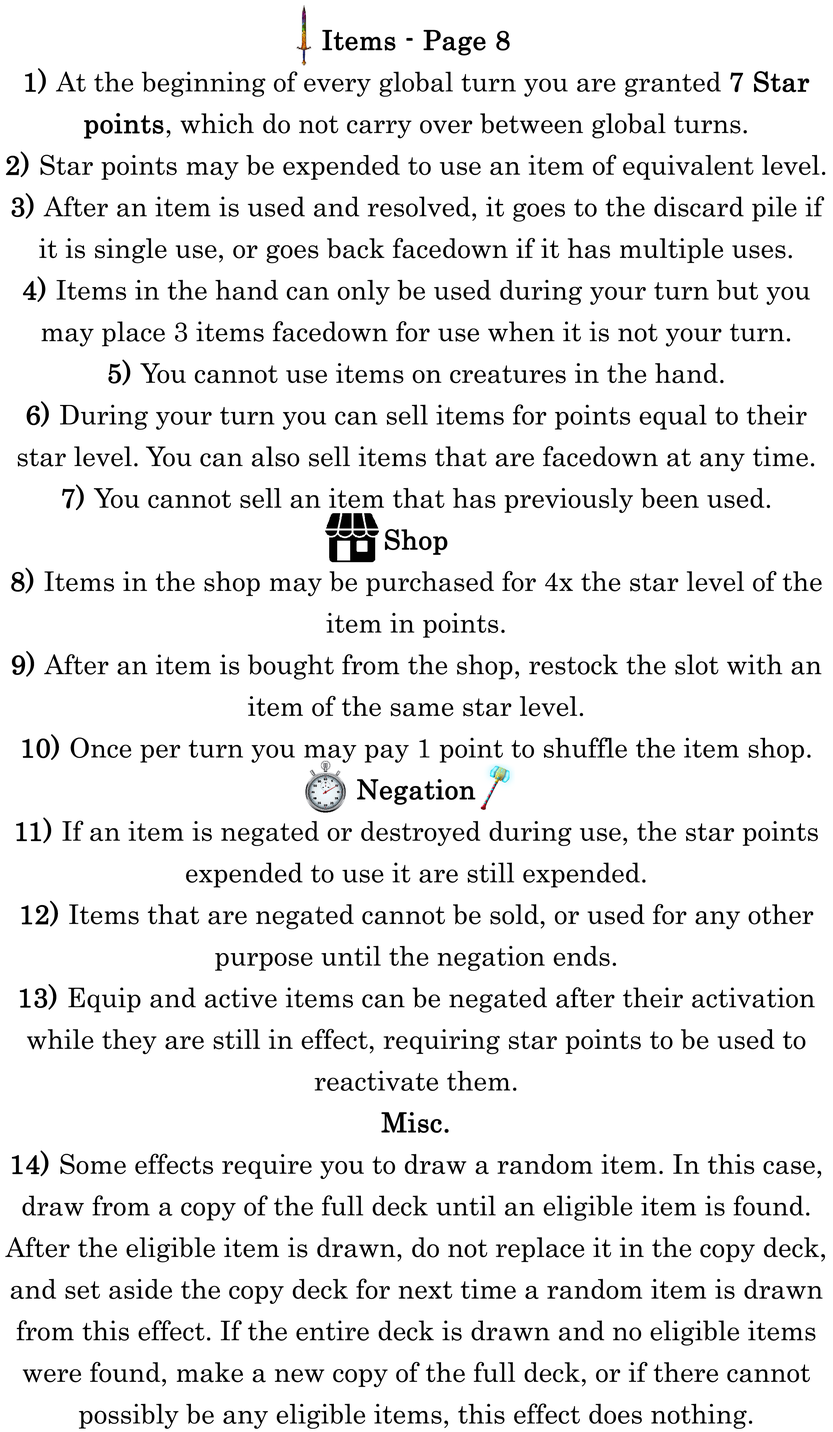
<style>
.page{position:relative;width:833px;height:1432px;background:#ffffff}
.page>*{position:absolute;margin:0}
.t1{font:46.3px/41.6px "Century";color:#000000}
.t2{font:46.3px/41.6px "Century";color:#000000;font-weight:bold}
</style>
<div class="page">
<p class="t1" style="left:5px;top:30px;width:820px;height:1399px;text-align:center"><span class="t2">Items - Page 8<br>1) </span>At the beginning of every global turn you are granted <span class="t2">7 Star points</span>, which do not carry over between global turns.<br><span class="t2">2) </span>Star points may be expended to use an item of equivalent level.<br><span class="t2">3) </span>After an item is used and resolved, it goes to the discard pile if it is single use, or goes back facedown if it has multiple uses.<br><span class="t2">4) </span>Items in the hand can only be used during your turn but you may place 3 items facedown for use when it is not your turn.<br><span class="t2">5) </span>You cannot use items on creatures in the hand.<br><span class="t2">6) </span>During your turn you can sell items for points equal to their star level. You can also sell items that are facedown at any time.<br><span class="t2">7) </span>You cannot sell an item that has previously been used.<br><span class="t2">Shop<br>8) </span>Items in the shop may be purchased for 4x the star level of the item in points.<br><span class="t2">9) </span>After an item is bought from the shop, restock the slot with an item of the same star level.<br><span class="t2">10) </span>Once per turn you may pay 1 point to shuffle the item shop.<br><span class="t2">Negation<br>11) </span>If an item is negated or destroyed during use, the star points expended to use it are still expended.<br><span class="t2">12) </span>Items that are negated cannot be sold, or used for any other purpose until the negation ends.<br><span class="t2">13) </span>Equip and active items can be negated after their activation while they are still in effect, requiring star points to be used to reactivate them.<br><span class="t2">Misc.<br>14) </span>Some effects require you to draw a random item. In this case, draw from a copy of the full deck until an eligible item is found. After the eligible item is drawn, do not replace it in the copy deck, and set aside the copy deck for next time a random item is drawn from this effect. If the entire deck is drawn and no eligible items were found, make a new copy of the full deck, or if there cannot possibly be any eligible items, this effect does nothing.</p>
</div>
